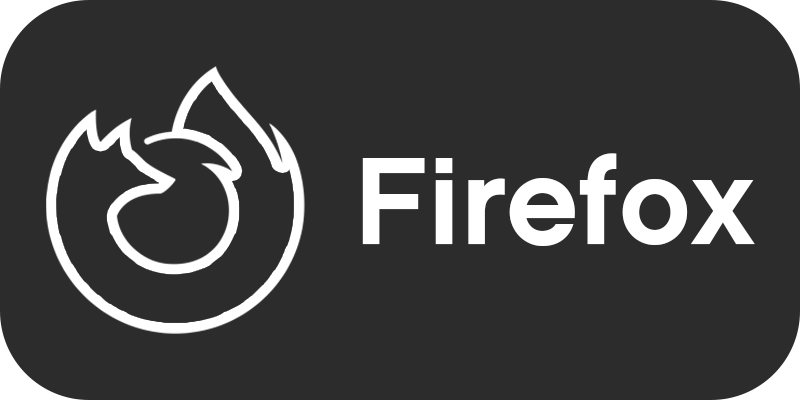
<style>
.page{position:relative;width:800px;height:400px;background:#2c2c2c}
.page>*{position:absolute;margin:0}
.t1{font:123.7px "Chalet-NewYorkNineteenSixty";letter-spacing:0.005em;color:#ffffff}
</style>
<div class="page">
<p class="t1" style="left:362px;top:153px;width:393px;height:93px">Firefox</p>
</div>
